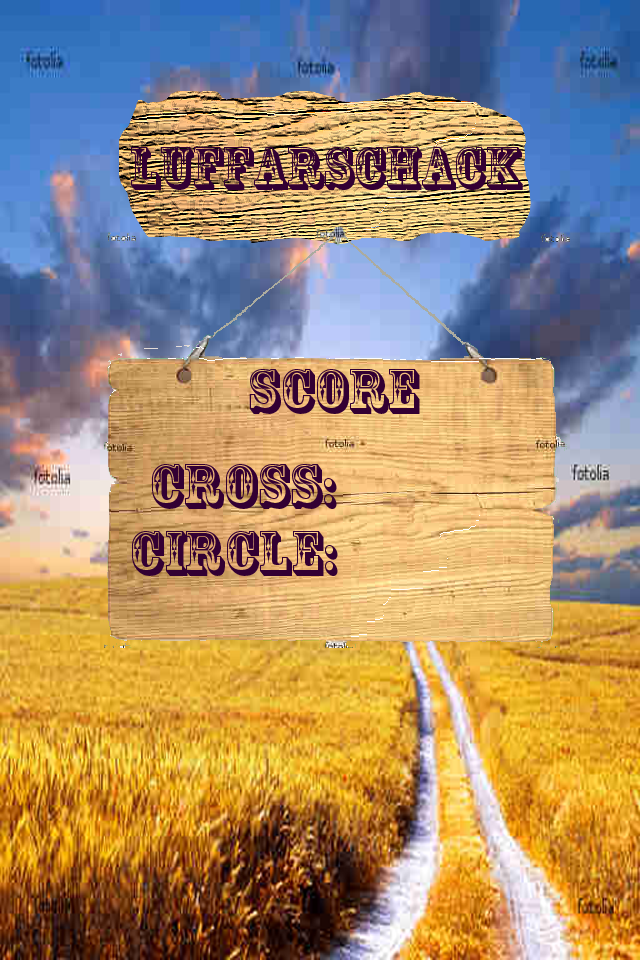
<style>
.page{position:relative;width:640px;height:960px}
.page>*{position:absolute;margin:0}
.t1{font:56px "RosewoodStd-Regular";color:#330033}
.t2{font:60px "RosewoodStd-Regular";color:#330033}
</style>
<div class="page">
<p class="t1" style="left:131px;top:147px;width:392px;height:43px">LuffarschaCK</p>
<p class="t2" style="left:249px;top:369px;width:171px;height:45px">Score</p>
<p class="t2" style="left:152px;top:464px;width:185px;height:45px">Cross:</p>
<p class="t2" style="left:132px;top:531px;width:206px;height:45px">Circle:</p>
</div>
